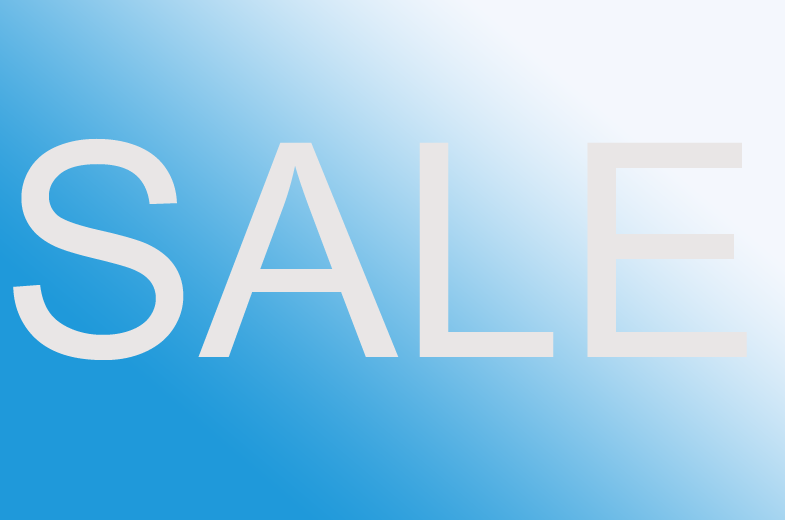
<style>
.page{position:relative;width:785px;height:520px}
.page>*{position:absolute;margin:0}
.t1{font:298.3px "ArialMT";color:#e9e6e6}
</style>
<div class="page">
<p class="t1" style="left:13px;top:138px;width:734px;height:222px">SALE</p>
</div>
